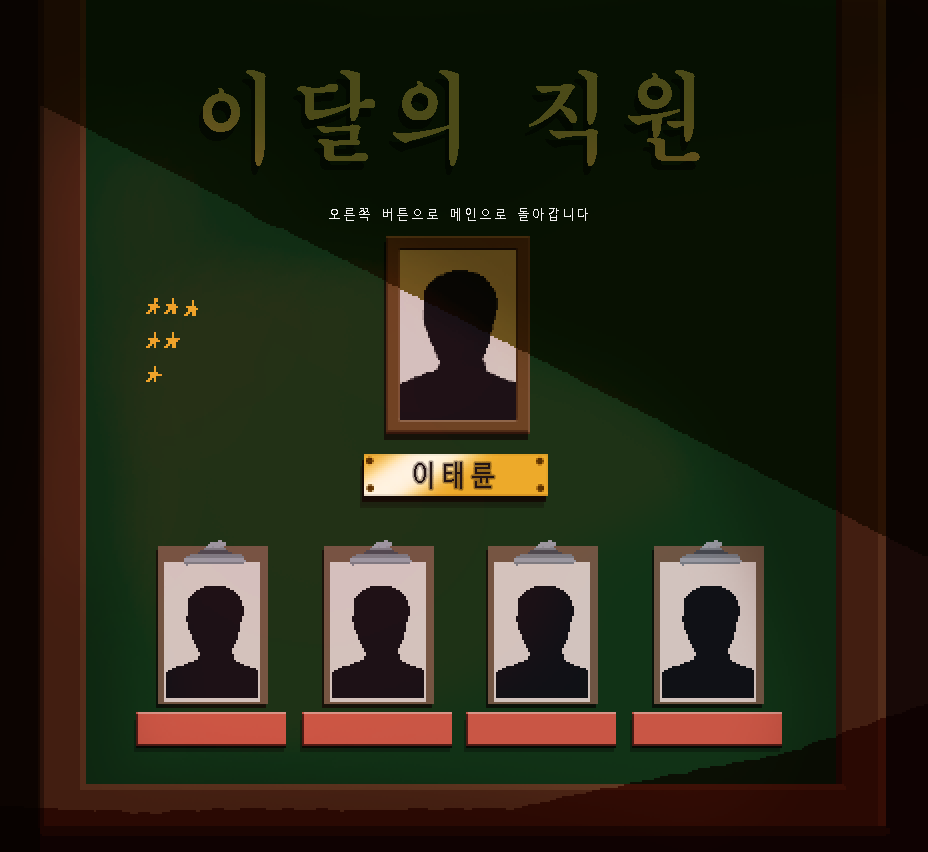
<style>
.page{position:relative;width:928px;height:852px}
.page>*{position:absolute;margin:0}
.t1{font:100.3px "H2mjrE";letter-spacing:0.14em;color:#4b4a18;scale:0.85 1}
.t2{font:15px "D2Coding";letter-spacing:0.14em;color:#f1f1f1;scale:0.85 1}
.t3{font:30px "D2Coding";letter-spacing:0.14em;color:#141414;scale:0.85 1}
</style>
<div class="page">
<p class="t1" style="left:203px;top:70px;width:497px;height:96px">이달의 직원</p>
<p class="t2" style="left:329px;top:208px;width:259px;height:13px">오른쪽 버튼으로 메인으로 돌아갑니다</p>
<p class="t3" style="left:414px;top:462px;width:80px;height:27px">이태륜</p>
</div>
